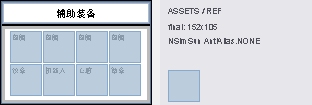
<style>
.page{position:relative;width:312px;height:105px;background:#e6e6eb}
.page>*{position:absolute;margin:0}
.t1{font:10px "NSimSun";color:#000000}
.t2{font:8px "ArialMT";color:#50505a}
.t3{font:7px "NSimSun";color:#8899aa}
</style>
<div class="page">
<p class="t1" style="left:57px;top:9px;width:38px;height:9px">辅助装备</p>
<p class="t2" style="left:168px;top:8px;width:53px;height:6px">ASSETS / REF</p>
<p class="t2" style="left:168px;top:24px;width:49px;height:6px">final: 152x105</p>
<p class="t3" style="left:13px;top:34px;width:12px;height:7px">图腾</p>
<p class="t3" style="left:46px;top:34px;width:12px;height:7px">图腾</p>
<p class="t3" style="left:79px;top:34px;width:12px;height:7px">图腾</p>
<p class="t3" style="left:112px;top:34px;width:12px;height:7px">图腾</p>
<p class="t2" style="left:169px;top:38px;width:91px;height:6px">NSimSun AntiAlias.NONE</p>
<p class="t3" style="left:12px;top:67px;width:13px;height:7px">纹章</p>
<p class="t3" style="left:46px;top:67px;width:19px;height:7px">机器人</p>
<p class="t3" style="left:80px;top:67px;width:12px;height:7px">心脏</p>
<p class="t3" style="left:111px;top:67px;width:13px;height:7px">徽章</p>
</div>
